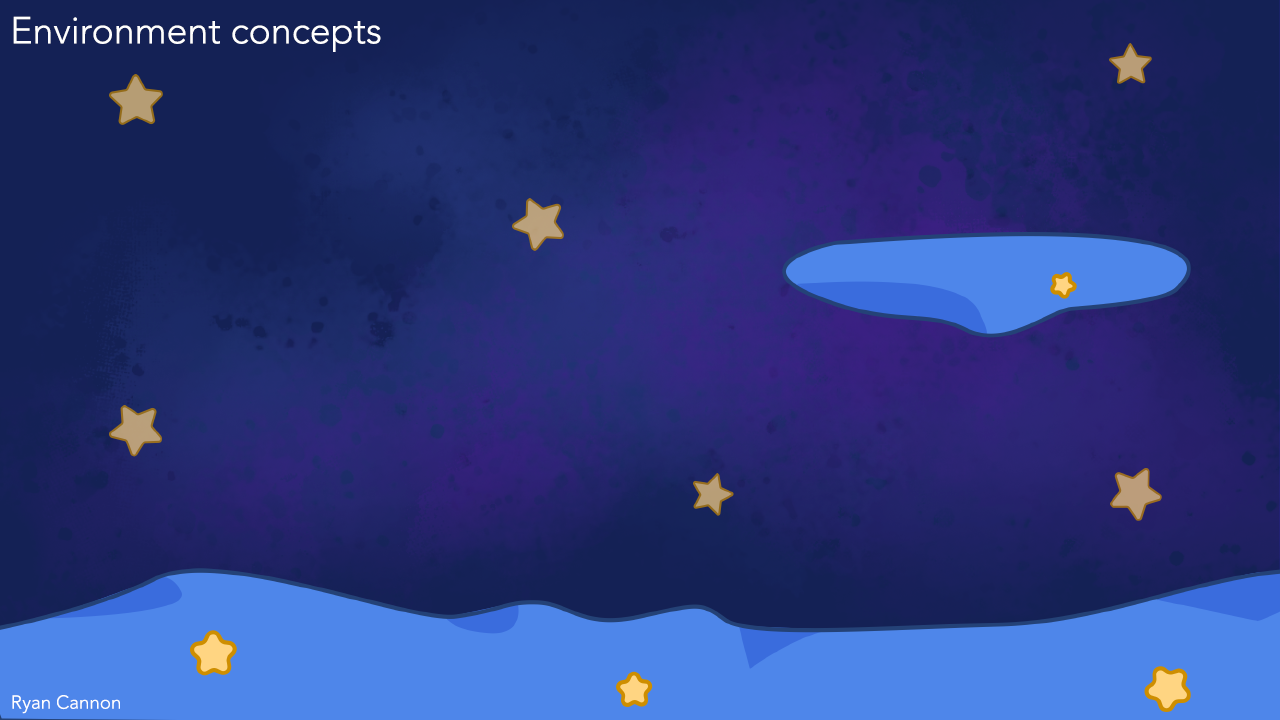
<style>
.page{position:relative;width:1280px;height:720px}
.page>*{position:absolute;margin:0}
.t1{font:37.5px "Avenir-Light";color:#ffffff}
.t2{font:18.8px "Avenir-Light";color:#ffffff}
</style>
<div class="page">
<p class="t1" style="left:13px;top:16px;width:368px;height:36px">Environment concepts</p>
<p class="t2" style="left:12px;top:695px;width:108px;height:19px">Ryan Cannon</p>
</div>
